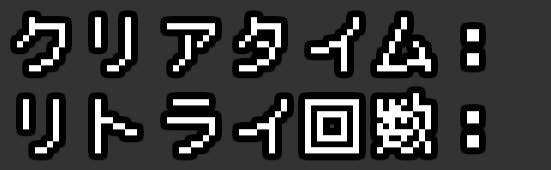
<style>
.page{position:relative;width:551px;height:170px;background:#333333}
.page>*{position:absolute;margin:0}
.t1{font:60px "BestTenDOT";letter-spacing:0.2em;color:#ffffff}
</style>
<div class="page">
<p class="t1" style="left:17px;top:17px;width:462px;height:55px">クリアタイム：</p>
<p class="t1" style="left:23px;top:93px;width:456px;height:61px">リトライ回数：</p>
</div>
